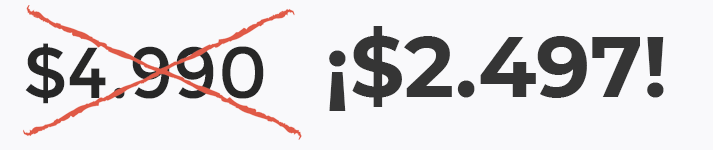
<style>
.page{position:relative;width:713px;height:150px;background:#f9f9fb}
.page>*{position:absolute;margin:0}
.t1{font:85.2px "Montserrat-Bold";color:#353535}
.t2{font:72px "Montserrat-Regular";color:#272727}
</style>
<div class="page">
<p class="t1" style="left:329px;top:26px;width:335px;height:85px">¡$2.497!</p>
<p class="t2" style="left:25px;top:43px;width:239px;height:61px">$4.990</p>
</div>
